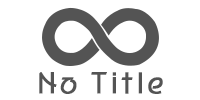
<style>
.page{position:relative;width:200px;height:100px;background:#ffffff}
.page>*{position:absolute;margin:0}
.t1{font:28.8px "HYporM";color:#545454;font-weight:bold}
</style>
<div class="page">
<p class="t1" style="left:39px;top:72px;width:124px;height:22px">No Title</p>
</div>
